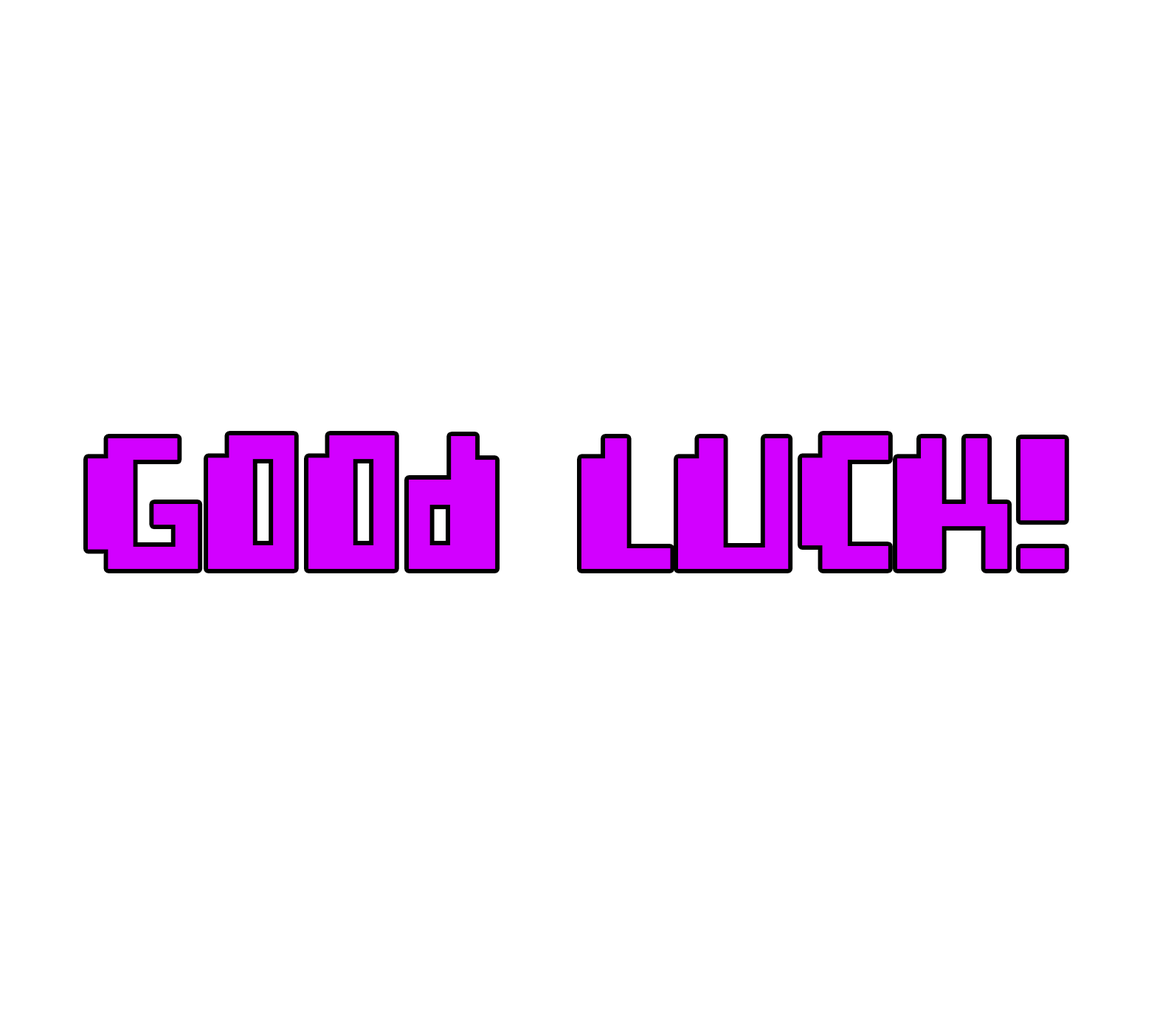
<style>
.page{position:relative;width:1154px;height:1033px;background:#ffffff}
.page>*{position:absolute;margin:0}
.t1{font:221.4px "Pixellifesmallcap";color:#d200ff}
</style>
<div class="page">
<p class="t1" style="left:88px;top:435px;width:977px;height:134px">GOOD LUCK!</p>
</div>
